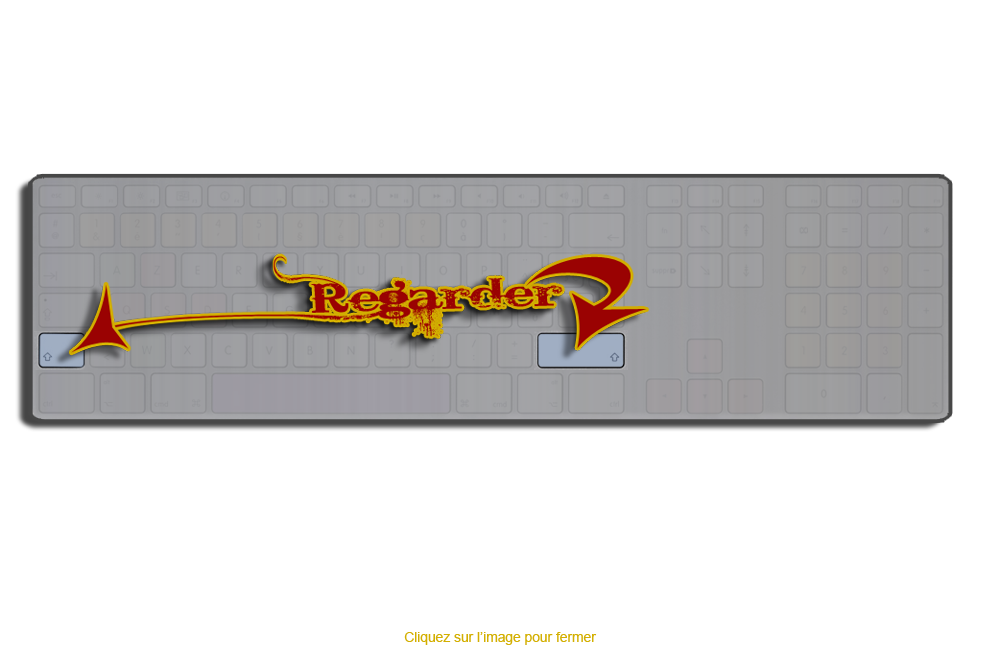
<style>
.page{position:relative;width:1000px;height:649px;background:#ffffff}
.page>*{position:absolute;margin:0}
.t1{font:14px "ArialMT";color:#d3af01}
</style>
<div class="page">
<p class="t1" style="left:404px;top:632px;width:193px;height:13px">Cliquez sur l’image pour fermer</p>
</div>
